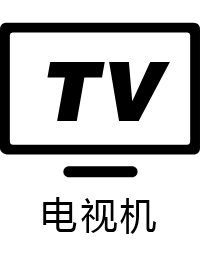
<style>
.page{position:relative;width:200px;height:255px;background:#ffffff}
.page>*{position:absolute;margin:0}
.t1{font:36px "MicrosoftYaHei";letter-spacing:0.1em;color:#000000}
</style>
<div class="page">
<p class="t1" style="left:43px;top:197px;width:113px;height:37px">电视机</p>
</div>
